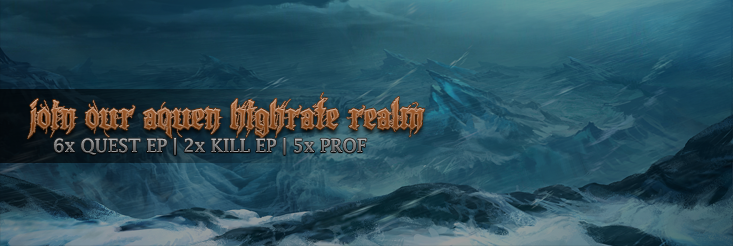
<style>
.page{position:relative;width:733px;height:246px}
.page>*{position:absolute;margin:0}
.t1{font:40.2px "LazyMonk-Demo";scale:1.12 1}
.t2{font:18px "LucidaFax"}
</style>
<div class="page">
<p class="t1" style="left:27px;top:92px;width:398px;height:47px">Join our aquen highrate realm</p>
<p class="t2" style="left:54px;top:138px;width:313px;height:17px">6x QUEST EP | 2x KILL EP | 5x PROF</p>
</div>
